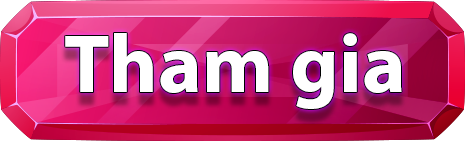
<style>
.page{position:relative;width:465px;height:141px}
.page>*{position:absolute;margin:0}
.t1{font:83.3px "MyriadPro-Bold";color:#ffffff}
</style>
<div class="page">
<p class="t1" style="left:65px;top:33px;width:337px;height:76px">Tham gia</p>
</div>
